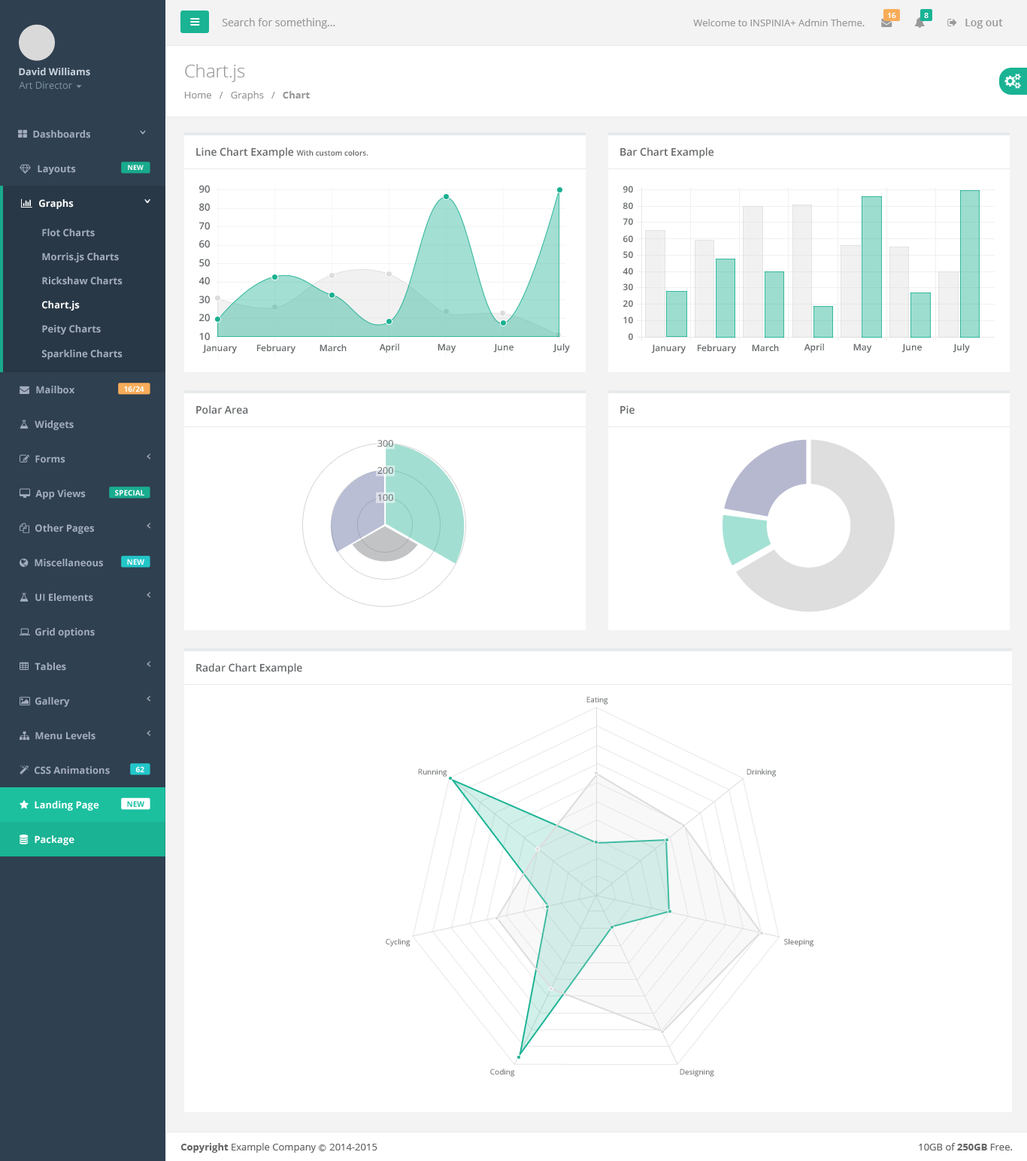
<style>
.page{position:relative;width:1027px;height:1161px;background:#ffffff}
.page>*{position:absolute;margin:0}
.t1{font:7.5px "OpenSans-Semibold";color:#ffffff}
.t2{font:10.5px "OpenSans";color:#999999}
.t3{font:9.8px "OpenSans";color:#999999}
.t4{font:10.5px "OpenSans-Semibold";color:#999999}
.t5{font:18px "OpenSans-Light";color:#999999}
.t6{font:9.8px "OpenSans-Bold";color:#cad1db}
.t7{font:9.8px "OpenSans";color:#7d93a5}
.t8{font:9.8px "OpenSans-Bold";color:#999999}
.t9{font:9.8px "OpenSans-Bold";color:#a2acbd}
.t10{font:7.5px "OpenSans-Semibold";color:#676a6c}
.t11{font:10.5px "OpenSans-Semibold";color:#676a6c}
.t12{font:6.8px "OpenSans-Bold";color:#fefefe}
.t13{font:9.8px "OpenSans-Semibold";color:#676a6c}
.t14{font:9px "OpenSans-Semibold";color:#676a6c}
.t15{font:9.8px "OpenSans-Bold";color:#ffffff}
.t16{font:7.5px "OpenSans-Bold";color:#fefefe}
.t17{font:9px "OpenSans";color:#676a6c;scale:1.05 1}
.t18{font:7.5px "OpenSans";color:#676a6c}
.t19{font:7.5px "OpenSans-Bold";color:#1cc09f}
.t20{font:9.8px "OpenSans";color:#666666}
.t21{font:9.8px "OpenSans-Bold";color:#666666}
.t22{font:7.5px "Meiryo";color:#666666}
</style>
<div class="page">
<p class="t1" style="left:888px;top:13px;width:8px;height:5px">16</p>
<p class="t1" style="left:924px;top:13px;width:5px;height:5px">8</p>
<p class="t2" style="left:222px;top:18px;width:113px;height:11px">Search for something...</p>
<p class="t3" style="left:693px;top:19px;width:172px;height:7px">Welcome to INSPINIA+ Admin Theme.</p>
<p class="t4" style="left:965px;top:19px;width:38px;height:10px">Log out</p>
<p class="t5" style="left:185px;top:64px;width:60px;height:18px">Chart.js</p>
<p class="t6" style="left:19px;top:68px;width:71px;height:8px">David Williams</p>
<p class="t7" style="left:19px;top:81px;width:53px;height:8px">Art Director</p>
<p class="t3" style="left:184px;top:91px;width:126px;height:10px">Home   /   Graphs   /   <span class="t8">Chart</span></p>
<p class="t9" style="left:33px;top:130px;width:57px;height:8px">Dashboards</p>
<p class="t10" style="left:196px;top:147px;width:172px;height:12px"><span class="t11">Line Chart Example </span>With custom colors.</p>
<p class="t11" style="left:620px;top:147px;width:94px;height:12px">Bar Chart Example</p>
<p class="t9" style="left:38px;top:165px;width:38px;height:9px">Layouts</p>
<p class="t12" style="left:128px;top:165px;width:16px;height:5px">NEW</p>
<p class="t13" style="left:199px;top:185px;width:11px;height:8px">90</p>
<p class="t14" style="left:623px;top:186px;width:10px;height:6px">90</p>
<p class="t15" style="left:39px;top:199px;width:35px;height:10px">Graphs</p>
<p class="t13" style="left:199px;top:203px;width:11px;height:8px">80</p>
<p class="t14" style="left:623px;top:202px;width:10px;height:7px">80</p>
<p class="t13" style="left:199px;top:222px;width:11px;height:8px">70</p>
<p class="t14" style="left:623px;top:218px;width:10px;height:7px">70</p>
<p class="t9" style="left:42px;top:229px;width:53px;height:8px">Flot Charts</p>
<p class="t13" style="left:199px;top:240px;width:11px;height:8px">60</p>
<p class="t14" style="left:623px;top:235px;width:10px;height:7px">60</p>
<p class="t9" style="left:42px;top:253px;width:77px;height:9px">Morris.js Charts</p>
<p class="t14" style="left:623px;top:251px;width:10px;height:7px">50</p>
<p class="t13" style="left:199px;top:259px;width:11px;height:8px">50</p>
<p class="t14" style="left:623px;top:268px;width:10px;height:6px">40</p>
<p class="t9" style="left:42px;top:277px;width:81px;height:8px">Rickshaw Charts</p>
<p class="t13" style="left:199px;top:277px;width:11px;height:8px">40</p>
<p class="t14" style="left:623px;top:283px;width:10px;height:7px">30</p>
<p class="t15" style="left:42px;top:301px;width:38px;height:10px">Chart.js</p>
<p class="t13" style="left:199px;top:296px;width:11px;height:8px">30</p>
<p class="t14" style="left:623px;top:300px;width:10px;height:7px">20</p>
<p class="t13" style="left:199px;top:314px;width:11px;height:8px">20</p>
<p class="t14" style="left:623px;top:317px;width:10px;height:6px">10</p>
<p class="t9" style="left:42px;top:325px;width:59px;height:10px">Peity Charts</p>
<p class="t13" style="left:199px;top:332px;width:11px;height:9px">10</p>
<p class="t14" style="left:629px;top:333px;width:4px;height:7px">0</p>
<p class="t9" style="left:41px;top:350px;width:82px;height:9px">Sparkline Charts</p>
<p class="t14" style="left:202px;top:344px;width:35px;height:9px">January</p>
<p class="t14" style="left:257px;top:344px;width:39px;height:9px">February</p>
<p class="t14" style="left:320px;top:344px;width:27px;height:7px">March</p>
<p class="t14" style="left:379px;top:344px;width:20px;height:9px">April</p>
<p class="t14" style="left:438px;top:344px;width:18px;height:9px">May</p>
<p class="t14" style="left:493px;top:344px;width:21px;height:9px">June</p>
<p class="t14" style="left:553px;top:344px;width:17px;height:9px">July</p>
<p class="t14" style="left:651px;top:344px;width:35px;height:9px">January</p>
<p class="t14" style="left:698px;top:344px;width:38px;height:9px">February</p>
<p class="t14" style="left:752px;top:344px;width:27px;height:7px">March</p>
<p class="t14" style="left:804px;top:344px;width:20px;height:9px">April</p>
<p class="t14" style="left:853px;top:344px;width:19px;height:9px">May</p>
<p class="t14" style="left:902px;top:344px;width:20px;height:9px">June</p>
<p class="t14" style="left:953px;top:344px;width:17px;height:9px">July</p>
<p class="t9" style="left:36px;top:386px;width:38px;height:8px">Mailbox</p>
<p class="t16" style="left:124px;top:386px;width:20px;height:6px">16/24</p>
<p class="t11" style="left:196px;top:405px;width:52px;height:9px">Polar Area</p>
<p class="t11" style="left:620px;top:405px;width:15px;height:9px">Pie</p>
<p class="t9" style="left:35px;top:420px;width:39px;height:10px">Widgets</p>
<p class="t17" style="left:377px;top:440px;width:16px;height:7px">300</p>
<p class="t9" style="left:35px;top:455px;width:30px;height:8px">Forms</p>
<p class="t17" style="left:377px;top:467px;width:16px;height:7px">200</p>
<p class="t9" style="left:35px;top:489px;width:51px;height:10px">App Views</p>
<p class="t16" style="left:115px;top:489px;width:29px;height:7px">SPECIAL</p>
<p class="t17" style="left:378px;top:494px;width:15px;height:7px">100</p>
<p class="t9" style="left:35px;top:524px;width:59px;height:10px">Other Pages</p>
<p class="t9" style="left:35px;top:559px;width:68px;height:8px">Miscellaneous</p>
<p class="t16" style="left:127px;top:559px;width:17px;height:6px">NEW</p>
<p class="t9" style="left:35px;top:593px;width:58px;height:9px">UI Elements</p>
<p class="t9" style="left:35px;top:628px;width:60px;height:10px">Grid options</p>
<p class="t9" style="left:35px;top:662px;width:31px;height:9px">Tables</p>
<p class="t11" style="left:196px;top:663px;width:106px;height:11px">Radar Chart Example</p>
<p class="t9" style="left:35px;top:697px;width:35px;height:10px">Gallery</p>
<p class="t18" style="left:586px;top:696px;width:22px;height:9px">Eating</p>
<p class="t9" style="left:35px;top:732px;width:60px;height:8px">Menu Levels</p>
<p class="t9" style="left:35px;top:766px;width:75px;height:8px">CSS Animations</p>
<p class="t16" style="left:135px;top:766px;width:9px;height:6px">62</p>
<p class="t18" style="left:418px;top:768px;width:29px;height:9px">Running</p>
<p class="t18" style="left:747px;top:768px;width:29px;height:9px">Drinking</p>
<p class="t15" style="left:35px;top:801px;width:64px;height:10px">Landing Page</p>
<p class="t19" style="left:127px;top:801px;width:17px;height:6px">NEW</p>
<p class="t15" style="left:35px;top:835px;width:39px;height:10px">Package</p>
<p class="t18" style="left:386px;top:938px;width:25px;height:9px">Cycling</p>
<p class="t18" style="left:784px;top:938px;width:30px;height:9px">Sleeping</p>
<p class="t18" style="left:490px;top:1068px;width:25px;height:9px">Coding</p>
<p class="t18" style="left:680px;top:1068px;width:34px;height:9px">Designing</p>
<p class="t20" style="left:180px;top:1143px;width:197px;height:10px"><span class="t21">Copyright</span> Example Company <span class="t22">Ⓒ </span>2014-2015</p>
<p class="t20" style="left:919px;top:1143px;width:94px;height:7px">10GB of <span class="t21">250GB</span> Free.</p>
</div>
